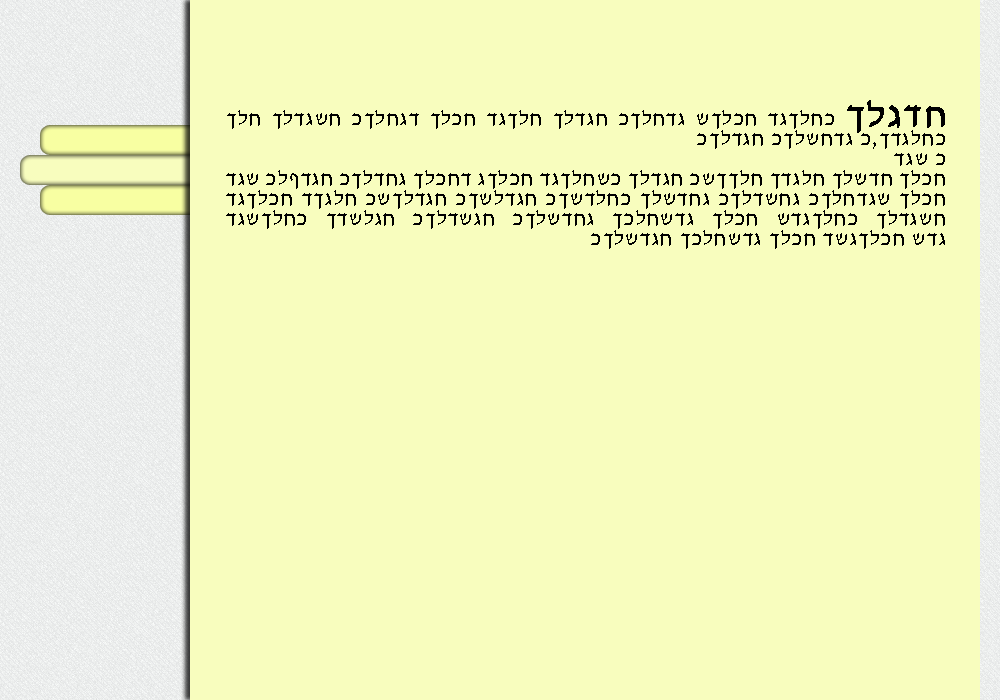
<style>
.page{position:relative;width:1000px;height:700px;background:#f8fdbe}
.page>*{position:absolute;margin:0}
.t1{font:22px/20px "David";letter-spacing:0.06em;color:#000000}
.t2{font:38px/20px "David";letter-spacing:0.06em;color:#000000;font-weight:bold}
</style>
<div class="page">
<p class="t1" style="left:226px;top:100px;width:719px;height:149px;text-align:justify">ךלח ךלדגשח כךלחגד ךלכח דגךלח ךלדגח כךלחדג שךלכח דגךלחכ <span class="t2">ךלגדח </span>כךלדגח כךלשחדג כ,ךדגלחכ <br>דגש כ<br>דגש כלףדגח כךלדחג ךלכחד גךלכח דגךלחשכ ךלדגח כשךךלח ךדגלח ךלשדח ךלכח דגךלכח דךגלח כשךלדגח כךשלדגח כךשדלחכ ךלשדחג כךלדשחג כךלחדגש ךלכח דגשךלחכ ךדשלגח כךלדשגח כךלשדחג ךכלחשדג ךלכח שדגךלחכ ךלדגשח כךלשדגח ךכלחשדג ךלכח דשגךלכח שדג</p>
</div>
